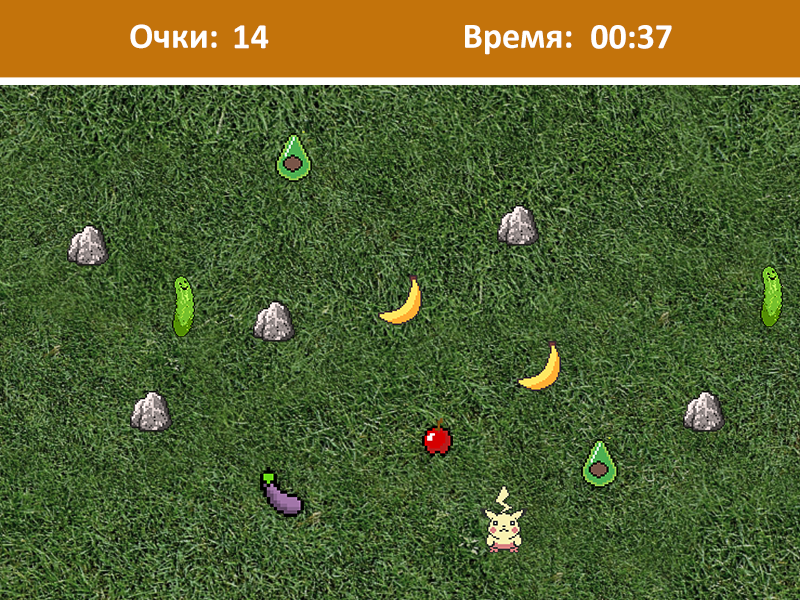
<style>
.page{position:relative;width:800px;height:600px}
.page>*{position:absolute;margin:0}
.t1{font:36px "Calibri-Bold";color:#ffffff}
</style>
<div class="page">
<p class="t1" style="left:130px;top:24px;width:87px;height:25px">Очки:</p>
<p class="t1" style="left:234px;top:25px;width:35px;height:24px">14</p>
<p class="t1" style="left:465px;top:25px;width:107px;height:30px">Время:</p>
<p class="t1" style="left:591px;top:25px;width:81px;height:24px">00:37</p>
</div>
